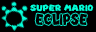
<style>
.page{position:relative;width:96px;height:32px;background:#000000}
.page>*{position:absolute;margin:0}
.t1{font:5px "NewSuperMarioFontMarioParty9";color:#02ffd9}
.t2{font:9.1px "NewSuperMarioFontMarioParty9";color:#030303;scale:0.72 1}
</style>
<div class="page">
<p class="t1" style="left:30px;top:4px;width:64px;height:8px">SUPER MARIO</p>
<p class="t2" style="left:35px;top:13px;width:52px;height:12px">ECLIPSE</p>
</div>
